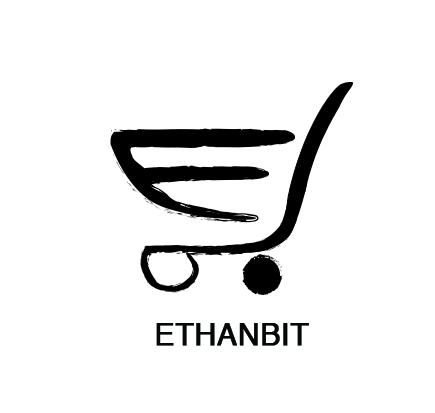
<style>
.page{position:relative;width:435px;height:413px;background:#ffffff}
.page>*{position:absolute;margin:0}
.t1{font:30px "Helvetica";color:#060808;font-weight:bold}
</style>
<div class="page">
<p class="t1" style="left:156px;top:323px;width:153px;height:23px">ETHANBIT</p>
</div>
